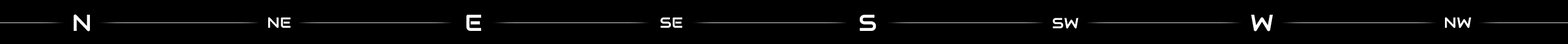
<style>
.page{position:relative;width:1568px;height:44px;background:#000000}
.page>*{position:absolute;margin:0}
.t1{font:23.2px "Audiowide-Regular";letter-spacing:0.025em;color:#ffffff}
.t2{font:14.7px "Audiowide-Regular";letter-spacing:0.025em;color:#ffffff}
</style>
<div class="page">
<p class="t1" style="left:74px;top:14px;width:16px;height:18px">N</p>
<p class="t2" style="left:268px;top:17px;width:23px;height:11px">NE</p>
<p class="t1" style="left:466px;top:15px;width:15px;height:16px">E</p>
<p class="t2" style="left:660px;top:17px;width:23px;height:11px">SE</p>
<p class="t1" style="left:860px;top:15px;width:16px;height:16px">S</p>
<p class="t2" style="left:1053px;top:18px;width:25px;height:11px">SW</p>
<p class="t1" style="left:1251px;top:15px;width:22px;height:17px">W</p>
<p class="t2" style="left:1445px;top:17px;width:26px;height:11px">NW</p>
</div>
